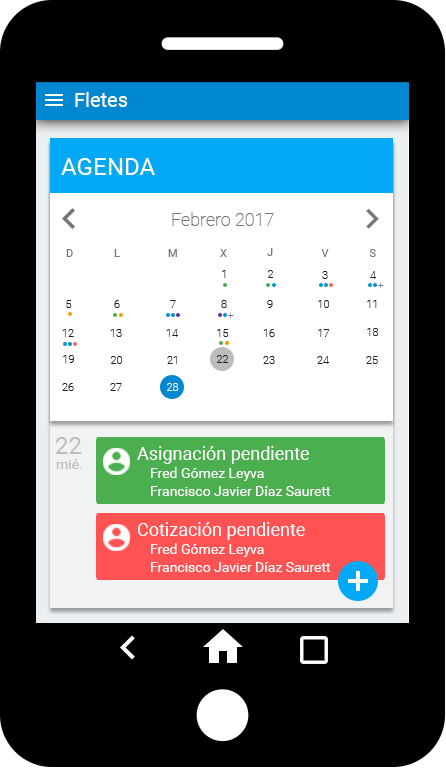
<style>
.page{position:relative;width:446px;height:768px;background:#000000}
.page>*{position:absolute;margin:0}
.t1{font:20px "Roboto-Regular";color:#ffffff}
.t2{font:24px "Roboto-Regular";color:#ffffff}
.t3{font:18px "Roboto-Thin";color:#757575}
.t4{font:11px "Roboto-Regular";color:#757575}
.t5{font:11.2px "Roboto-Regular";color:#757575}
.t6{font:11px "Roboto-Thin";color:#212121}
.t7{font:10px "Roboto-Thin";color:#757575}
.t8{font:11px "Roboto-Thin";color:#ffffff}
.t9{font:24px "Roboto-Regular";color:#bdbdbd}
.t10{font:18px "Roboto-Regular";color:#ffffff}
.t11{font:14px "Roboto-Regular";color:#bdbdbd}
.t12{font:14px "Roboto-Regular";color:#ffffff}
</style>
<div class="page">
<p class="t1" style="left:75px;top:92px;width:53px;height:15px">Fletes</p>
<p class="t2" style="left:61px;top:158px;width:94px;height:17px">AGENDA</p>
<p class="t3" style="left:172px;top:212px;width:102px;height:14px">Febrero 2017</p>
<p class="t4" style="left:66px;top:249px;width:7px;height:8px">D</p>
<p class="t4" style="left:114px;top:249px;width:6px;height:8px">L</p>
<p class="t4" style="left:168px;top:249px;width:9px;height:8px">M</p>
<p class="t4" style="left:220px;top:249px;width:7px;height:8px">X</p>
<p class="t5" style="left:267px;top:248px;width:6px;height:8px">J</p>
<p class="t4" style="left:321px;top:249px;width:8px;height:8px">V</p>
<p class="t4" style="left:369px;top:249px;width:7px;height:8px">S</p>
<p class="t6" style="left:222px;top:270px;width:4px;height:8px">1</p>
<p class="t6" style="left:268px;top:270px;width:6px;height:8px">2</p>
<p class="t6" style="left:322px;top:271px;width:6px;height:8px">3</p>
<p class="t6" style="left:370px;top:271px;width:6px;height:8px">4</p>
<p class="t7" style="left:378px;top:282px;width:6px;height:7px">+</p>
<p class="t6" style="left:66px;top:300px;width:6px;height:8px">5</p>
<p class="t6" style="left:114px;top:300px;width:6px;height:8px">6</p>
<p class="t6" style="left:170px;top:300px;width:6px;height:8px">7</p>
<p class="t6" style="left:221px;top:300px;width:6px;height:8px">8</p>
<p class="t6" style="left:267px;top:300px;width:6px;height:8px">9</p>
<p class="t6" style="left:318px;top:300px;width:11px;height:8px">10</p>
<p class="t6" style="left:367px;top:300px;width:10px;height:8px">11</p>
<p class="t7" style="left:228px;top:312px;width:6px;height:7px">+</p>
<p class="t6" style="left:62px;top:329px;width:12px;height:8px">12</p>
<p class="t6" style="left:110px;top:329px;width:12px;height:8px">13</p>
<p class="t6" style="left:166px;top:329px;width:12px;height:8px">14</p>
<p class="t6" style="left:217px;top:329px;width:12px;height:8px">15</p>
<p class="t6" style="left:263px;top:329px;width:12px;height:8px">16</p>
<p class="t6" style="left:318px;top:329px;width:11px;height:8px">17</p>
<p class="t6" style="left:367px;top:328px;width:12px;height:8px">18</p>
<p class="t6" style="left:63px;top:355px;width:11px;height:8px">19</p>
<p class="t6" style="left:111px;top:356px;width:11px;height:8px">20</p>
<p class="t6" style="left:167px;top:356px;width:10px;height:8px">21</p>
<p class="t6" style="left:217px;top:355px;width:12px;height:8px">22</p>
<p class="t6" style="left:263px;top:356px;width:12px;height:8px">23</p>
<p class="t6" style="left:317px;top:356px;width:12px;height:8px">24</p>
<p class="t6" style="left:366px;top:356px;width:12px;height:8px">25</p>
<p class="t6" style="left:62px;top:383px;width:12px;height:8px">26</p>
<p class="t6" style="left:110px;top:383px;width:12px;height:8px">27</p>
<p class="t8" style="left:167px;top:383px;width:12px;height:8px">28</p>
<p class="t9" style="left:56px;top:437px;width:26px;height:17px">22</p>
<p class="t10" style="left:137px;top:446px;width:172px;height:18px">Asignación pendiente</p>
<p class="t11" style="left:56px;top:459px;width:26px;height:10px">mié.</p>
<p class="t12" style="left:151px;top:467px;width:113px;height:14px">Fred Gómez Leyva</p>
<p class="t12" style="left:151px;top:486px;width:180px;height:10px">Francisco Javier Díaz Saurett</p>
<p class="t10" style="left:137px;top:522px;width:168px;height:18px">Cotización pendiente</p>
<p class="t12" style="left:151px;top:543px;width:113px;height:14px">Fred Gómez Leyva</p>
<p class="t12" style="left:151px;top:562px;width:180px;height:10px">Francisco Javier Díaz Saurett</p>
</div>
